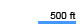
<style>
.page{position:relative;width:80px;height:28px;background:#ffffff}
.page>*{position:absolute;margin:0}
.t1{font:10px "ArialMT";color:#000000}
</style>
<div class="page">
<p class="t1" style="left:50px;top:12px;width:26px;height:7px">500 ft</p>
</div>
